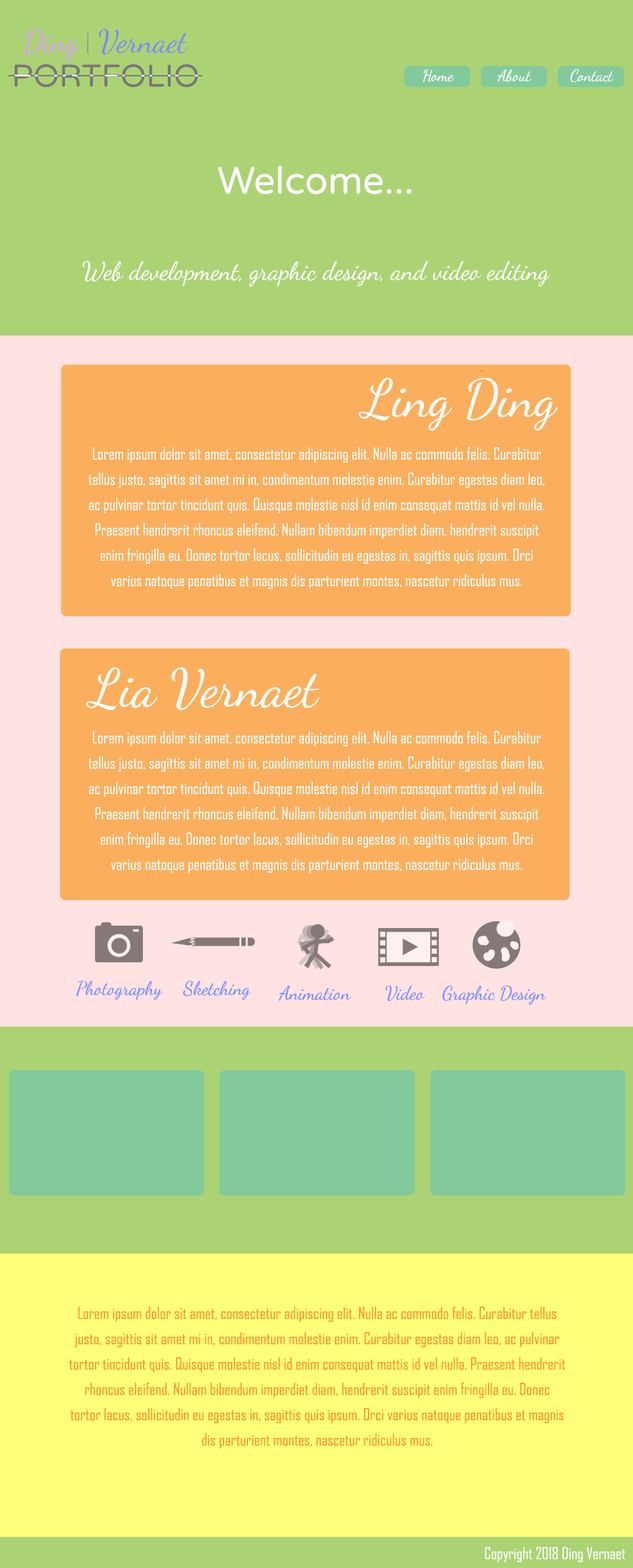
<style>
.page{position:relative;width:633px;height:1568px;background:#acd373}
.page>*{position:absolute;margin:0}
.t1{font:15.8px "DancingScriptOT";color:#ffffff}
.t2{font:38px "VarelaRound-Regular";color:#ffffff}
.t3{font:25.3px "DancingScriptOT";color:#ffffff}
.t4{font:52.8px "DancingScriptOT";color:#ffffff}
.t5{font:15.8px/25.3px "AgencyFB-Reg";color:#ffffff}
.t6{font:19px "DancingScriptOT";color:#7f8eff}
.t7{font:15.8px/25.3px "AgencyFB-Reg";color:#fa962a}
.t8{font:15.8px "AgencyFB-Reg";color:#ffffff}
</style>
<div class="page">
<p class="t1" style="left:423px;top:69px;width:31px;height:13px">Home</p>
<p class="t1" style="left:498px;top:69px;width:33px;height:13px">About</p>
<p class="t1" style="left:570px;top:69px;width:44px;height:13px">Contact</p>
<p class="t2" style="left:218px;top:166px;width:194px;height:28px">Welcome...</p>
<p class="t3" style="left:82px;top:261px;width:468px;height:25px">Web development, graphic design, and video editing</p>
<p class="t4" style="left:359px;top:378px;width:199px;height:53px">Ling Ding</p>
<p class="t5" style="left:88px;top:447px;width:457px;height:142px;text-align:center">Lorem ipsum dolor sit amet, consectetur adipiscing elit. Nulla ac commodo felis. Curabitur tellus justo, sagittis sit amet mi in, condimentum molestie enim. Curabitur egestas diam leo, ac pulvinar tortor tincidunt quis. Quisque molestie nisl id enim consequat mattis id vel nulla. Praesent hendrerit rhoncus eleifend. Nullam bibendum imperdiet diam, hendrerit suscipit enim fringilla eu. Donec tortor lacus, sollicitudin eu egestas in, sagittis quis ipsum. Orci varius natoque penatibus et magnis dis parturient montes, nascetur ridiculus mus.</p>
<p class="t4" style="left:86px;top:667px;width:234px;height:43px">Lia Vernaet</p>
<p class="t5" style="left:88px;top:731px;width:457px;height:142px;text-align:center">Lorem ipsum dolor sit amet, consectetur adipiscing elit. Nulla ac commodo felis. Curabitur tellus justo, sagittis sit amet mi in, condimentum molestie enim. Curabitur egestas diam leo, ac pulvinar tortor tincidunt quis. Quisque molestie nisl id enim consequat mattis id vel nulla. Praesent hendrerit rhoncus eleifend. Nullam bibendum imperdiet diam, hendrerit suscipit enim fringilla eu. Donec tortor lacus, sollicitudin eu egestas in, sagittis quis ipsum. Orci varius natoque penatibus et magnis dis parturient montes, nascetur ridiculus mus.</p>
<p class="t6" style="left:76px;top:981px;width:86px;height:19px">Photography</p>
<p class="t6" style="left:183px;top:981px;width:68px;height:19px">Sketching</p>
<p class="t6" style="left:279px;top:986px;width:72px;height:15px">Animation</p>
<p class="t6" style="left:386px;top:986px;width:39px;height:15px">Video</p>
<p class="t6" style="left:443px;top:986px;width:104px;height:19px">Graphic Design</p>
<p class="t7" style="left:69px;top:1306px;width:497px;height:143px;text-align:center">Lorem ipsum dolor sit amet, consectetur adipiscing elit. Nulla ac commodo felis. Curabitur tellus justo, sagittis sit amet mi in, condimentum molestie enim. Curabitur egestas diam leo, ac pulvinar tortor tincidunt quis. Quisque molestie nisl id enim consequat mattis id vel nulla. Praesent hendrerit rhoncus eleifend. Nullam bibendum imperdiet diam, hendrerit suscipit enim fringilla eu. Donec tortor lacus, sollicitudin eu egestas in, sagittis quis ipsum. Orci varius natoque penatibus et magnis dis parturient montes, nascetur ridiculus mus.</p>
<p class="t8" style="left:485px;top:1547px;width:141px;height:15px">Copyright 2018 Ding Vernaet</p>
</div>
